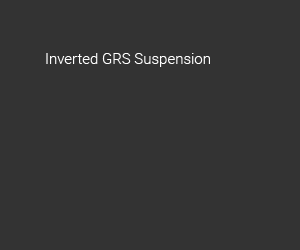
<style>
.page{position:relative;width:300px;height:250px;background:#333333}
.page>*{position:absolute;margin:0}
.t1{font:15px "Roboto-Light";color:#ffffff}
</style>
<div class="page">
<p class="t1" style="left:46px;top:53px;width:164px;height:14px">Inverted GRS Suspension</p>
</div>
